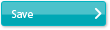
<style>
.page{position:relative;width:110px;height:30px;background:#4dc2cb}
.page>*{position:absolute;margin:0}
.t1{font:11px "MyriadPro-Regular";color:#ffffff}
</style>
<div class="page">
<p class="t1" style="left:11px;top:10px;width:22px;height:8px">Save</p>
</div>
